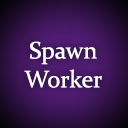
<style>
.page{position:relative;width:128px;height:128px}
.page>*{position:absolute;margin:0}
.t1{font:24px "Constantia";color:#ffffff}
</style>
<div class="page">
<p class="t1" style="left:24px;top:41px;width:78px;height:47px;text-align:center">Spawn Worker</p>
</div>
